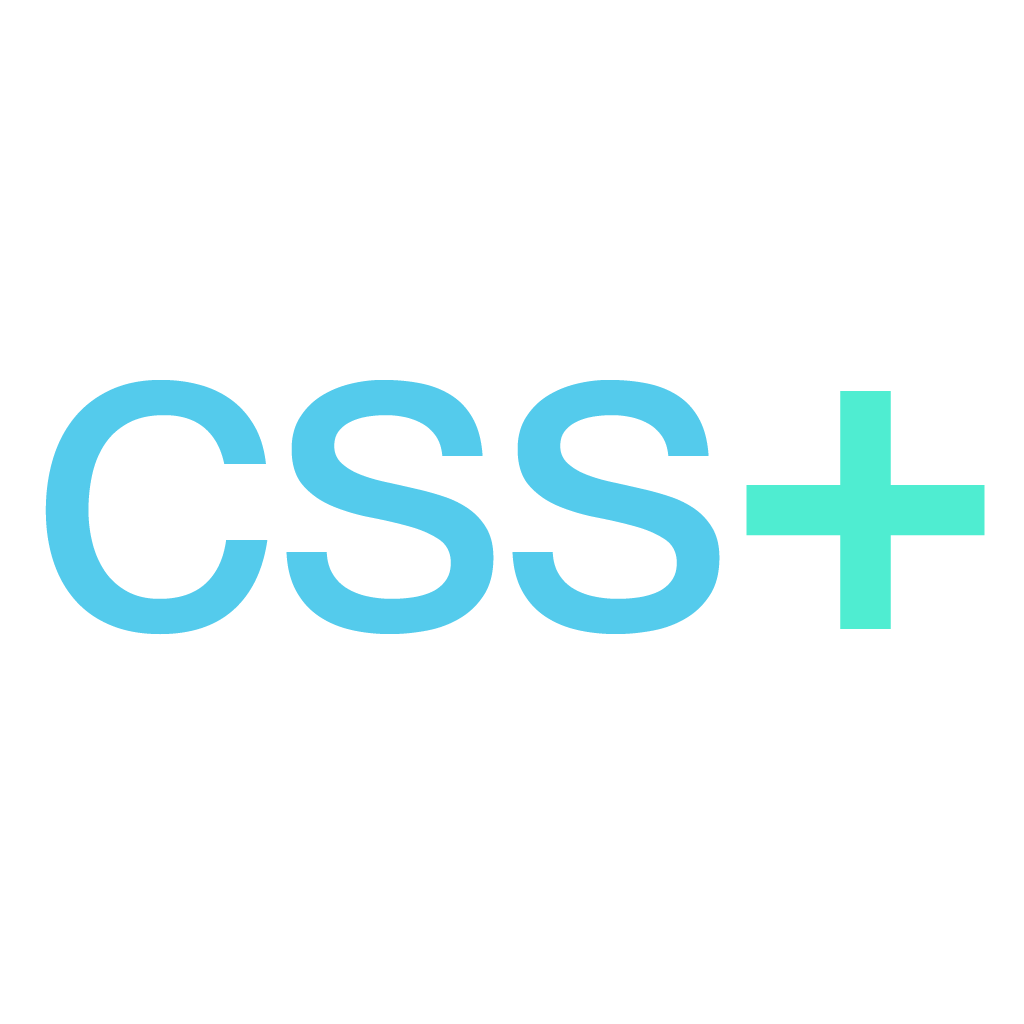
<style>
.page{position:relative;width:1024px;height:1024px;background:#ffffff}
.page>*{position:absolute;margin:0}
.t1{font:470.8px "HelveticaNeue";letter-spacing:-0.02em;color:#54cbec}
.t2{font:470.8px "HelveticaNeue-Bold";letter-spacing:-0.02em;color:#4fedd1}
</style>
<div class="page">
<p class="t1" style="left:45px;top:380px;width:940px;height:255px">css<span class="t2">+</span></p>
</div>
